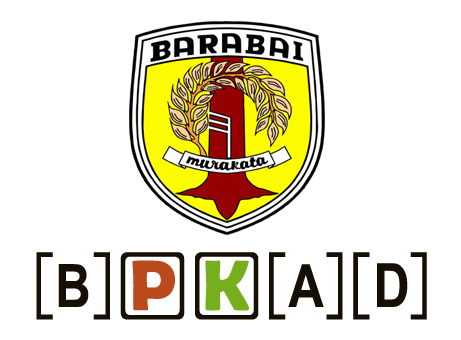
<style>
.page{position:relative;width:461px;height:340px;background:#ffffff}
.page>*{position:absolute;margin:0}
.t1{font:72px "TI30XProEmuKeys";color:#160f05;font-variant:small-caps}
.t2{font:72px "BerlinSansFBDemi-Bold";color:#ba491c;font-variant:small-caps}
.t3{font:72px "BerlinSansFBDemi-Bold";color:#76af1b;font-variant:small-caps}
</style>
<div class="page">
<p class="t1" style="left:36px;top:252px;width:391px;height:68px">BPKAD</p>
<p class="t2" style="left:132px;top:260px;width:43px;height:51px">P</p>
<p class="t3" style="left:205px;top:260px;width:44px;height:51px">K</p>
</div>
